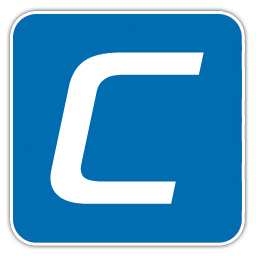
<style>
.page{position:relative;width:256px;height:256px;background:#006db1}
.page>*{position:absolute;margin:0}
.t1{font:256px "BauhausITC";color:#ffffff}
</style>
<div class="page">
<p class="t1" style="left:50px;top:52px;width:154px;height:152px">C</p>
</div>
